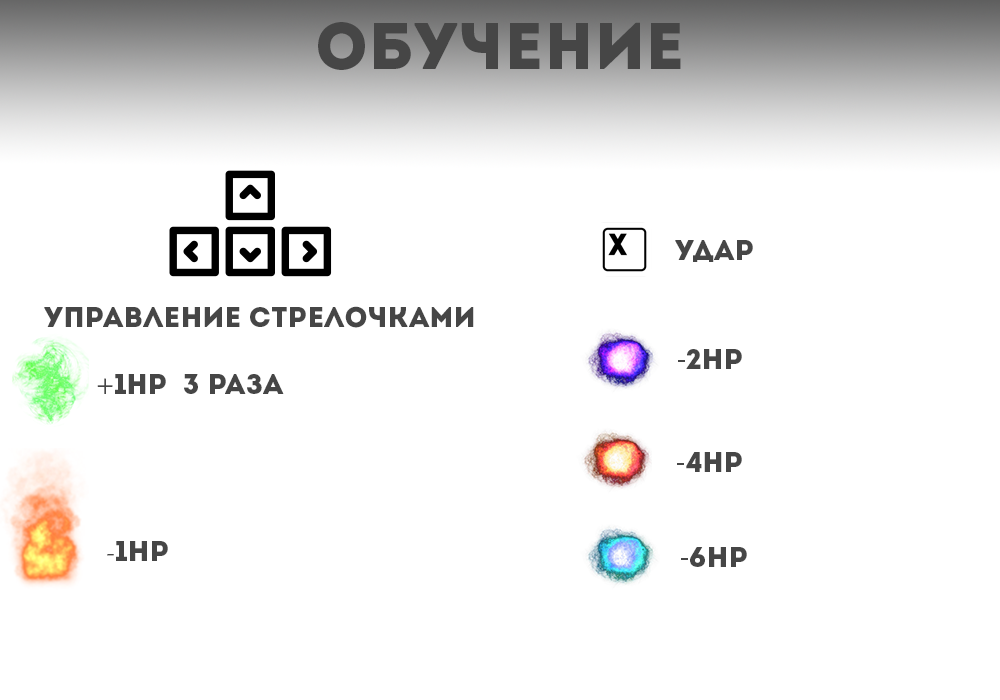
<style>
.page{position:relative;width:1000px;height:700px;background:#ffffff}
.page>*{position:absolute;margin:0}
.t1{font:66px "Intro";color:#464646}
.t2{font:28.5px "Intro";color:#464646}
.t3{font:28.5px "MyriadPro-Regular";color:#464646}
.t4{font:28.5px "MinionPro-Regular";color:#464646}
</style>
<div class="page">
<p class="t1" style="left:318px;top:22px;width:363px;height:48px">обучение</p>
<p class="t2" style="left:675px;top:240px;width:78px;height:22px">удар</p>
<p class="t2" style="left:44px;top:306px;width:430px;height:22px">управление стрелочками</p>
<p class="t2" style="left:678px;top:349px;width:64px;height:20px"><span class="t3">-</span>2hp</p>
<p class="t2" style="left:97px;top:374px;width:187px;height:20px"><span class="t3">+</span>1hp  3 раза</p>
<p class="t2" style="left:677px;top:452px;width:65px;height:20px"><span class="t3">-</span>4hp</p>
<p class="t2" style="left:107px;top:541px;width:61px;height:20px"><span class="t4">-</span>1hp</p>
<p class="t2" style="left:681px;top:547px;width:66px;height:20px"><span class="t3">-</span>6hp</p>
</div>
